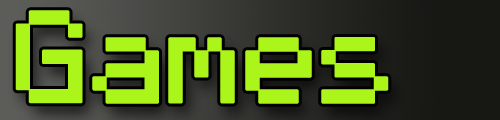
<style>
.page{position:relative;width:500px;height:120px}
.page>*{position:absolute;margin:0}
.t1{font:124.5px "LCDSolid";color:#acf51b}
</style>
<div class="page">
<p class="t1" style="left:15px;top:10px;width:374px;height:94px">Games</p>
</div>
